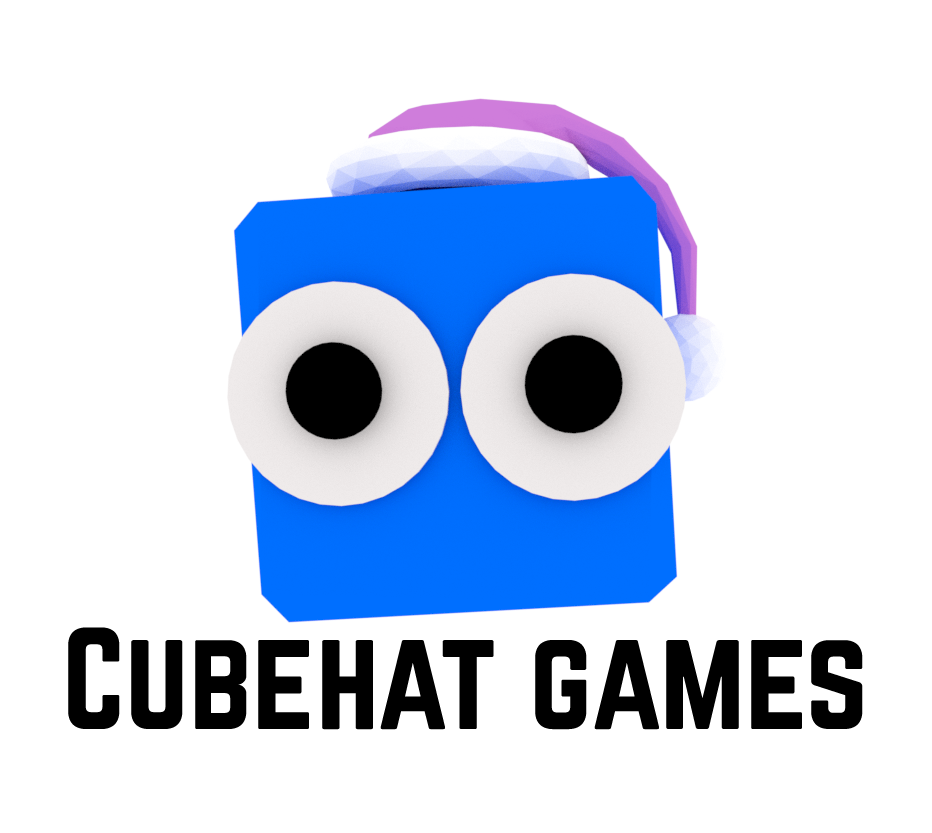
<style>
.page{position:relative;width:932px;height:833px;background:#ffffff}
.page>*{position:absolute;margin:0}
.t1{font:127px "Norwester-Regular";color:#000000}
</style>
<div class="page">
<p class="t1" style="left:68px;top:627px;width:795px;height:103px">Cubehat games</p>
</div>
